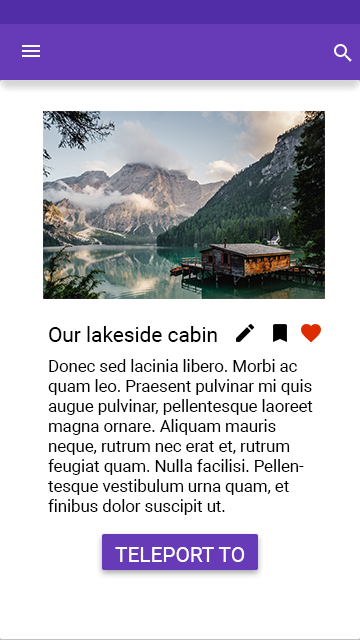
<style>
.page{position:relative;width:360px;height:640px;background:#ffffff}
.page>*{position:absolute;margin:0}
.t1{font:20.8px "Roboto-Regular";color:#000000}
.t2{font:16.7px "Roboto-Regular";color:#000000}
.t3{font:20.8px "Roboto-Regular";color:#ffffff}
</style>
<div class="page">
<p class="t1" style="left:49px;top:326px;width:168px;height:16px">Our lakeside cabin</p>
<p class="t2" style="left:48px;top:359px;width:265px;height:156px">Donec sed lacinia libero. Morbi ac quam leo. Praesent pulvinar mi quis augue pulvinar, pellentesque laoreet magna ornare. Aliquam mauris neque, rutrum nec erat et, rutrum feugiat quam. Nulla facilisi. Pellentesque vestibulum urna quam, et finibus dolor suscipit ut.</p>
<p class="t3" style="left:115px;top:547px;width:130px;height:15px">TELEPORT TO</p>
</div>
